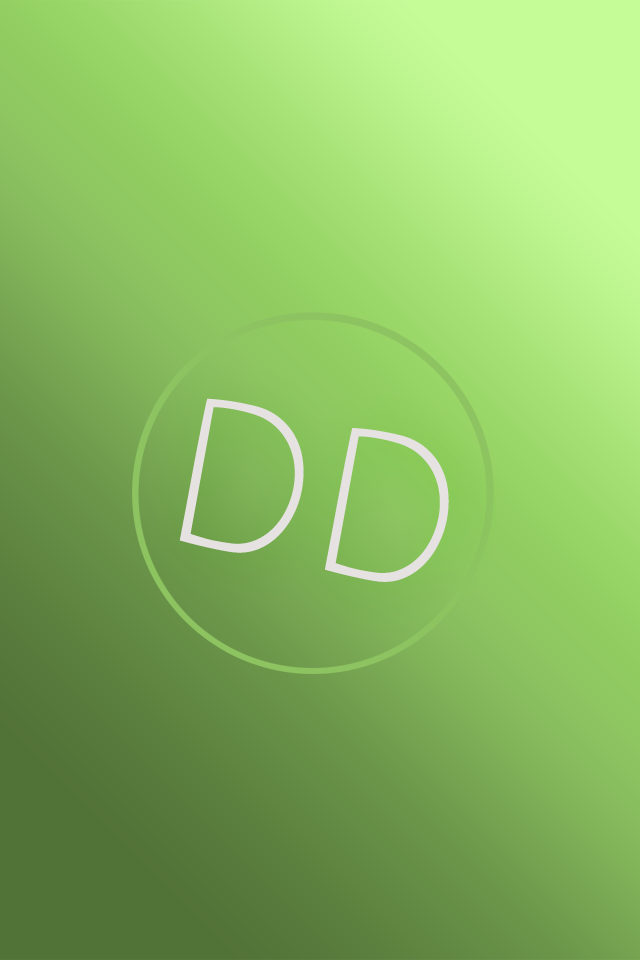
<style>
.page{position:relative;width:640px;height:960px}
.page>*{position:absolute;margin:0}
.t1{font:200px "cafbrewery";letter-spacing:0.14em;color:#e6e2e2}
</style>
<div class="page">
<p class="t1" style="left:179px;top:398px;width:270px;height:184px;rotate:11deg">DD</p>
</div>
